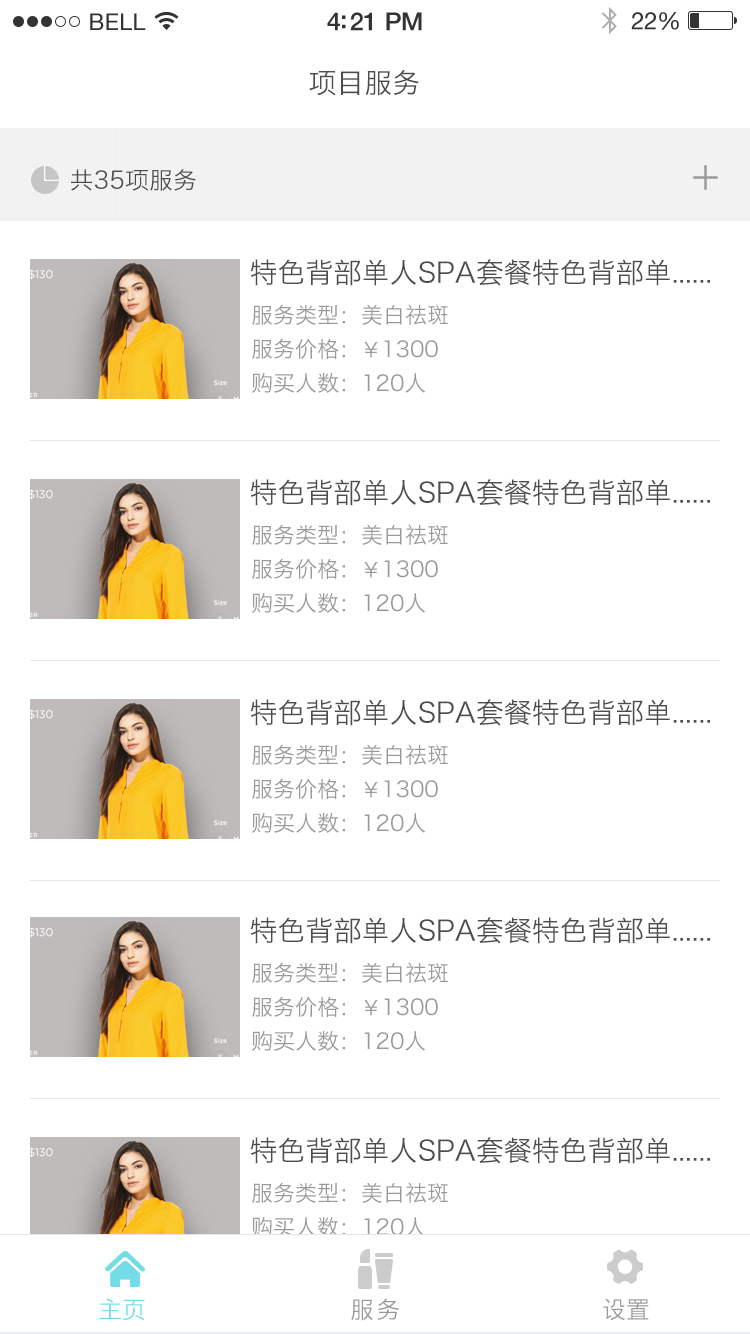
<style>
.page{position:relative;width:750px;height:1334px;background:#ffffff}
.page>*{position:absolute;margin:0}
.t1{font:28px "HiraginoSansGB-W3";color:#4d4d4d}
.t2{font:24px "HiraginoSansGB-W3";color:#4d4d4d}
.t3{font:22px/34px "HiraginoSansGB-W3";color:#999999}
.t4{font:20px/34px "HiraginoSansGB-W3";color:#999999}
.t5{font:24px "HiraginoSansGB-W3";color:#73dce6}
.t6{font:24px "HiraginoSansGB-W3";letter-spacing:0.1em;color:#999999}
.t7{font:24px "HiraginoSansGB-W3";color:#999999}
</style>
<div class="page">
<p class="t1" style="left:309px;top:70px;width:110px;height:26px">项目服务</p>
<p class="t2" style="left:71px;top:169px;width:125px;height:22px">共35项服务</p>
<p class="t1" style="left:250px;top:259px;width:460px;height:27px">特色背部单人SPA套餐特色背部单......</p>
<p class="t3" style="left:251px;top:304px;width:197px;height:89px;text-align:justify">服务类型：美白祛斑<br>服务价格：<span class="t4">￥</span>1300<br>购买人数：120人</p>
<p class="t1" style="left:250px;top:479px;width:460px;height:27px">特色背部单人SPA套餐特色背部单......</p>
<p class="t3" style="left:251px;top:524px;width:197px;height:89px;text-align:justify">服务类型：美白祛斑<br>服务价格：<span class="t4">￥</span>1300<br>购买人数：120人</p>
<p class="t1" style="left:250px;top:699px;width:460px;height:27px">特色背部单人SPA套餐特色背部单......</p>
<p class="t3" style="left:251px;top:744px;width:197px;height:89px;text-align:justify">服务类型：美白祛斑<br>服务价格：<span class="t4">￥</span>1300<br>购买人数：120人</p>
<p class="t1" style="left:250px;top:917px;width:460px;height:27px">特色背部单人SPA套餐特色背部单......</p>
<p class="t3" style="left:251px;top:962px;width:197px;height:89px;text-align:justify">服务类型：美白祛斑<br>服务价格：<span class="t4">￥</span>1300<br>购买人数：120人</p>
<p class="t1" style="left:250px;top:1137px;width:460px;height:27px">特色背部单人SPA套餐特色背部单......</p>
<p class="t3" style="left:251px;top:1182px;width:197px;height:89px;text-align:justify">服务类型：美白祛斑<br>购买人数：120人<br>剩余未做：55人</p>
<p class="t5" style="left:99px;top:1298px;width:46px;height:23px">主页</p>
<p class="t6" style="left:351px;top:1298px;width:48px;height:23px">服务</p>
<p class="t7" style="left:603px;top:1298px;width:46px;height:23px">设置</p>
</div>
